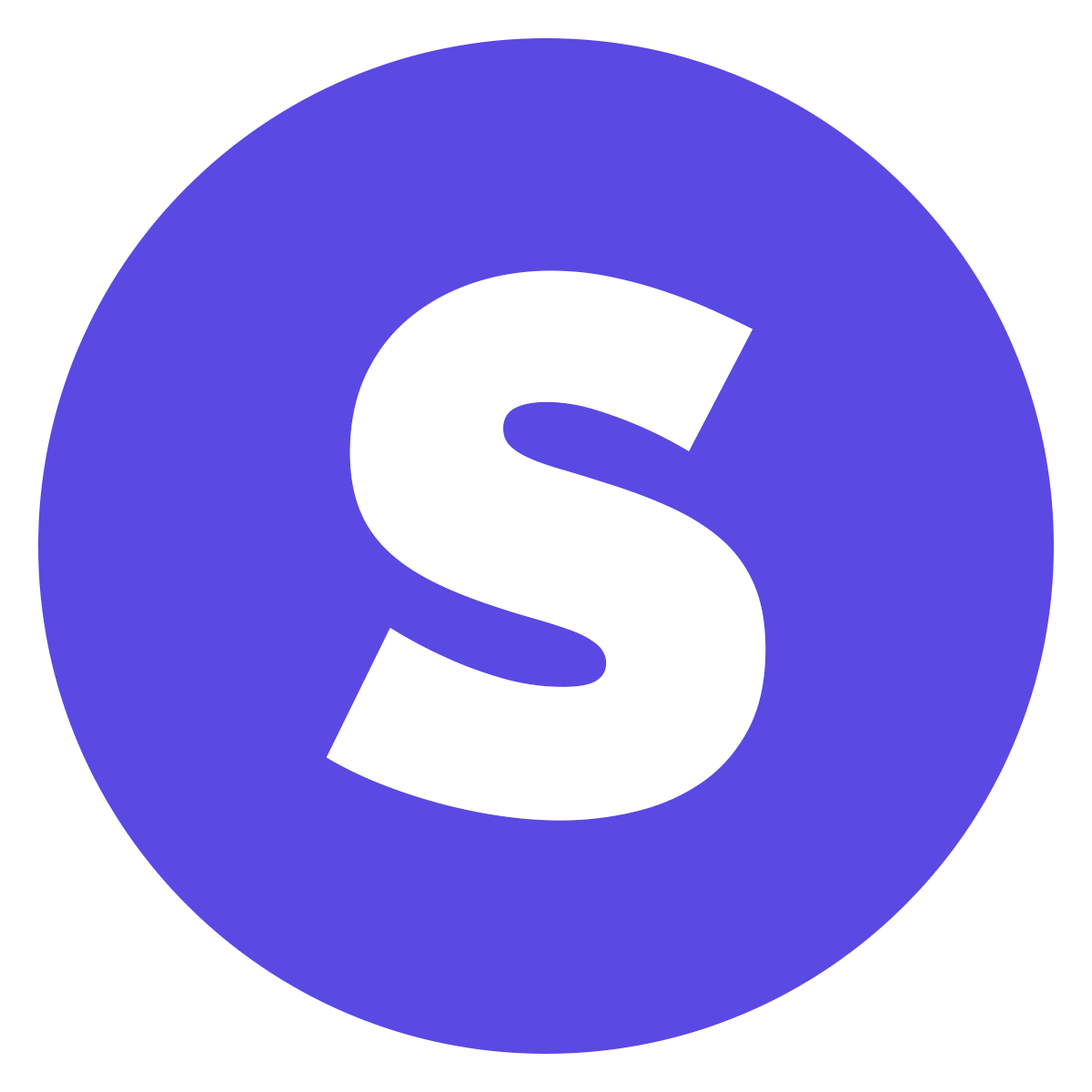
<style>
.page{position:relative;width:1092px;height:1092px;background:#5a49e3}
.page>*{position:absolute;margin:0}
.t1{font:758.3px "Raleway-Heavy";color:#ffffff}
</style>
<div class="page">
<p class="t1" style="left:326px;top:270px;width:440px;height:551px">S</p>
</div>
